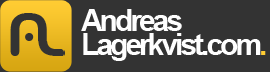
<style>
.page{position:relative;width:270px;height:72px;background:#333333}
.page>*{position:absolute;margin:0}
.t1{font:30px/24px "Arial-BoldMT";letter-spacing:-0.1em;color:#fefefe}
.t2{font:30px/24px "Arial-BoldMT";letter-spacing:-0.1em;color:#ffcc33}
</style>
<div class="page">
<p class="t1" style="left:81px;top:9px;width:185px;height:52px">Andreas<br>Lagerkvist.com<span class="t2">.</span></p>
</div>
